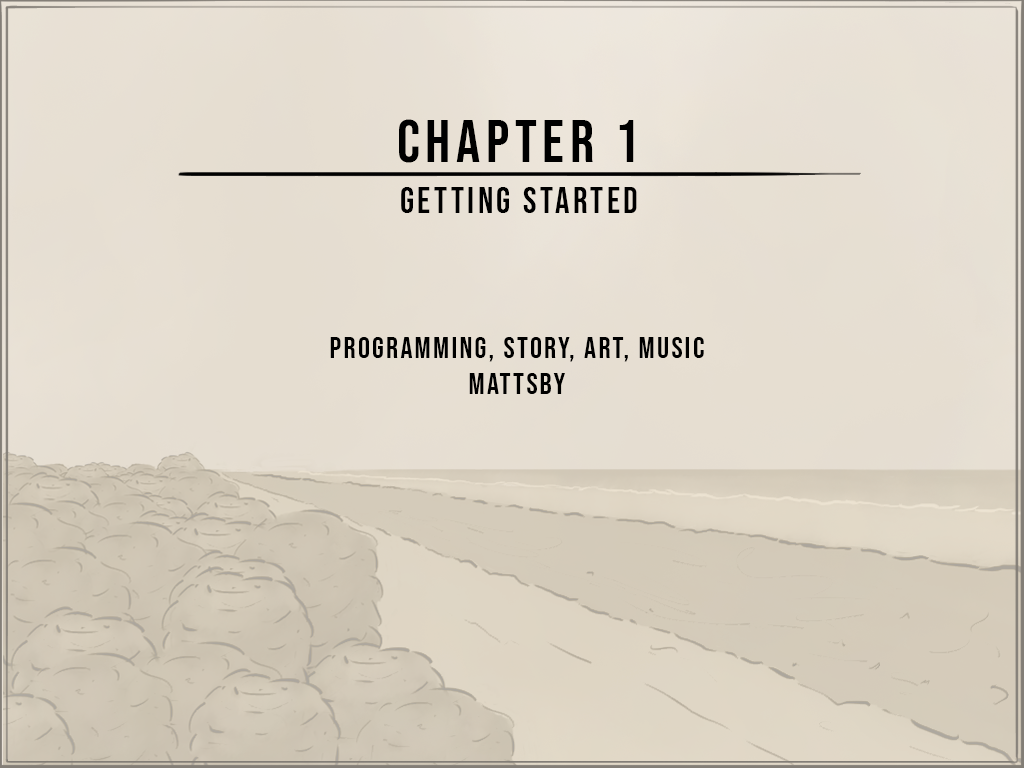
<style>
.page{position:relative;width:1024px;height:768px}
.page>*{position:absolute;margin:0}
.t1{font:60px "BebasNeue-Regular";letter-spacing:0.095em;color:#000000}
.t2{font:36px "BebasNeue-Regular";letter-spacing:0.095em;color:#000000}
.t3{font:30px "BebasNeue-Regular";letter-spacing:0.075em;color:#000000}
</style>
<div class="page">
<p class="t1" style="left:399px;top:119px;width:235px;height:44px">CHAPTER 1</p>
<p class="t2" style="left:401px;top:187px;width:236px;height:26px">GETTING STARTED</p>
<p class="t3" style="left:330px;top:337px;width:374px;height:57px;text-align:center">Programming, Story, ART, Music<br>Mattsby</p>
</div>
